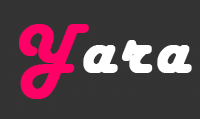
<style>
.page{position:relative;width:200px;height:119px;background:#333333}
.page>*{position:absolute;margin:0}
.t1{font:72px "HarlowSolid";letter-spacing:0.05em;color:#ffffff;font-weight:bold}
.t2{font:72px "HarlowSolid";letter-spacing:0.05em;color:#ff0066;font-weight:bold}
</style>
<div class="page">
<p class="t1" style="left:19px;top:24px;width:173px;height:75px"><span class="t2">Y</span>ara</p>
</div>
